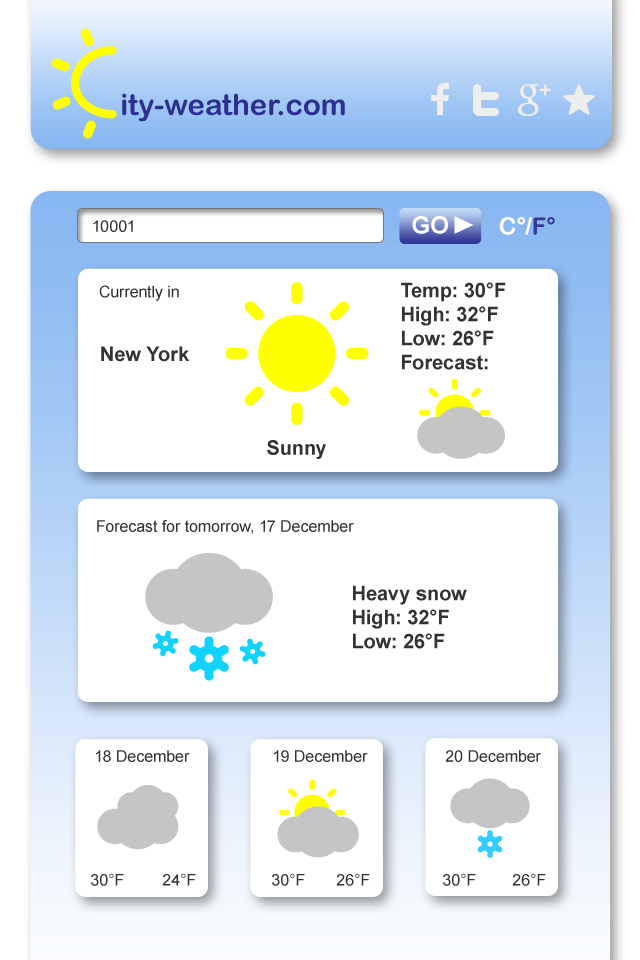
<style>
.page{position:relative;width:640px;height:960px;background:#ffffff}
.page>*{position:absolute;margin:0}
.t1{font:16px "ArialMT";color:#333333}
.t2{font:24px "Arial-BoldMT";color:#ffffff}
.t3{font:24px "ArialRoundedMTBold";color:#ffffff}
.t4{font:24px "ArialRoundedMTBold";color:#363a98}
.t5{font:20px "Arial-BoldMT";color:#333333}
</style>
<div class="page">
<p class="t1" style="left:93px;top:220px;width:40px;height:12px">10001</p>
<p class="t2" style="left:412px;top:216px;width:36px;height:18px">GO</p>
<p class="t3" style="left:499px;top:217px;width:56px;height:18px">C°/<span class="t4">F°</span></p>
<p class="t1" style="left:99px;top:285px;width:80px;height:16px">Currently in</p>
<p class="t5" style="left:401px;top:282px;width:105px;height:88px">Temp: 30°F<br>High: 32°F<br>Low: 26°F<br>Forecast:</p>
<p class="t5" style="left:101px;top:346px;width:88px;height:16px">New York</p>
<p class="t5" style="left:267px;top:440px;width:59px;height:19px">Sunny</p>
<p class="t1" style="left:97px;top:520px;width:257px;height:14px">Forecast for tomorrow, 17 December</p>
<p class="t5" style="left:353px;top:585px;width:114px;height:64px">Heavy snow<br>High: 32°F<br>Low: 26°F</p>
<p class="t1" style="left:96px;top:750px;width:94px;height:12px">18 December</p>
<p class="t1" style="left:274px;top:750px;width:94px;height:12px">19 December</p>
<p class="t1" style="left:445px;top:750px;width:96px;height:12px">20 December</p>
<p class="t1" style="left:91px;top:873px;width:33px;height:13px">30°F</p>
<p class="t1" style="left:162px;top:873px;width:34px;height:13px">24°F</p>
<p class="t1" style="left:272px;top:873px;width:33px;height:13px">30°F</p>
<p class="t1" style="left:336px;top:873px;width:34px;height:13px">26°F</p>
<p class="t1" style="left:443px;top:873px;width:33px;height:13px">30°F</p>
<p class="t1" style="left:512px;top:873px;width:34px;height:13px">26°F</p>
</div>
